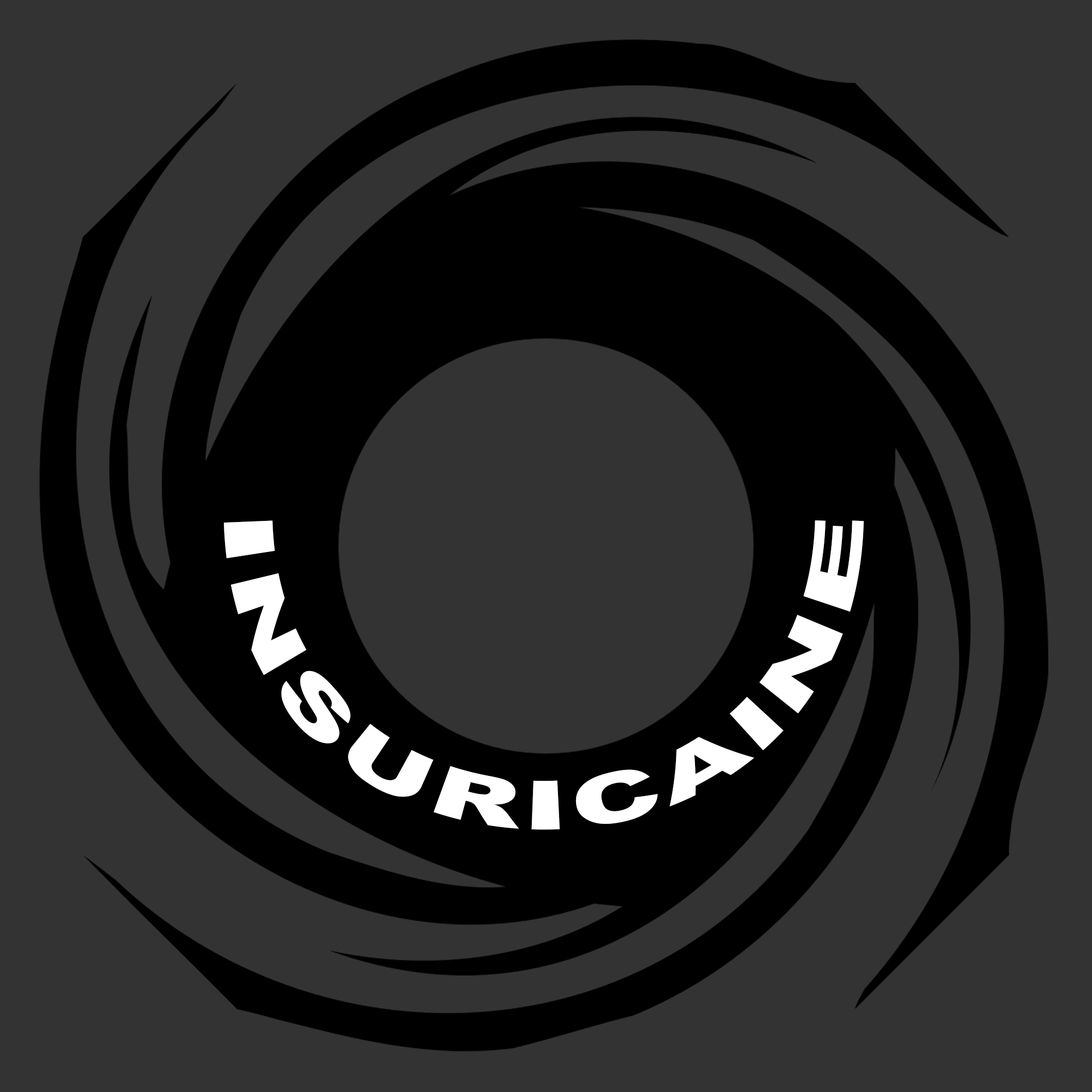
<style>
.page{position:relative;width:1092px;height:1092px;background:#333333}
.page>*{position:absolute;margin:0}
.t1{font:68.2px "Arial-Black";letter-spacing:0.02em;color:#ffffff}
</style>
<div class="page">
<p class="t1" style="left:224px;top:520px;width:640px;height:310px;text-align:center">INSURICAINE</p>
</div>
